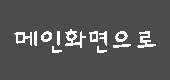
<style>
.page{position:relative;width:170px;height:80px;background:#4c4c4c}
.page>*{position:absolute;margin:0}
.t1{font:30px "GabiaSolmee";color:#ffffff}
</style>
<div class="page">
<p class="t1" style="left:14px;top:29px;width:142px;height:24px">메인화면으로</p>
</div>
